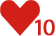
<style>
.page{position:relative;width:56px;height:36px;background:#d22018}
.page>*{position:absolute;margin:0}
.t1{font:23.4px "MyriadPro-Regular";letter-spacing:-0.1em;color:#d22018;font-weight:bold}
</style>
<div class="page">
<p class="t1" style="left:35px;top:19px;width:20px;height:17px">10</p>
</div>
